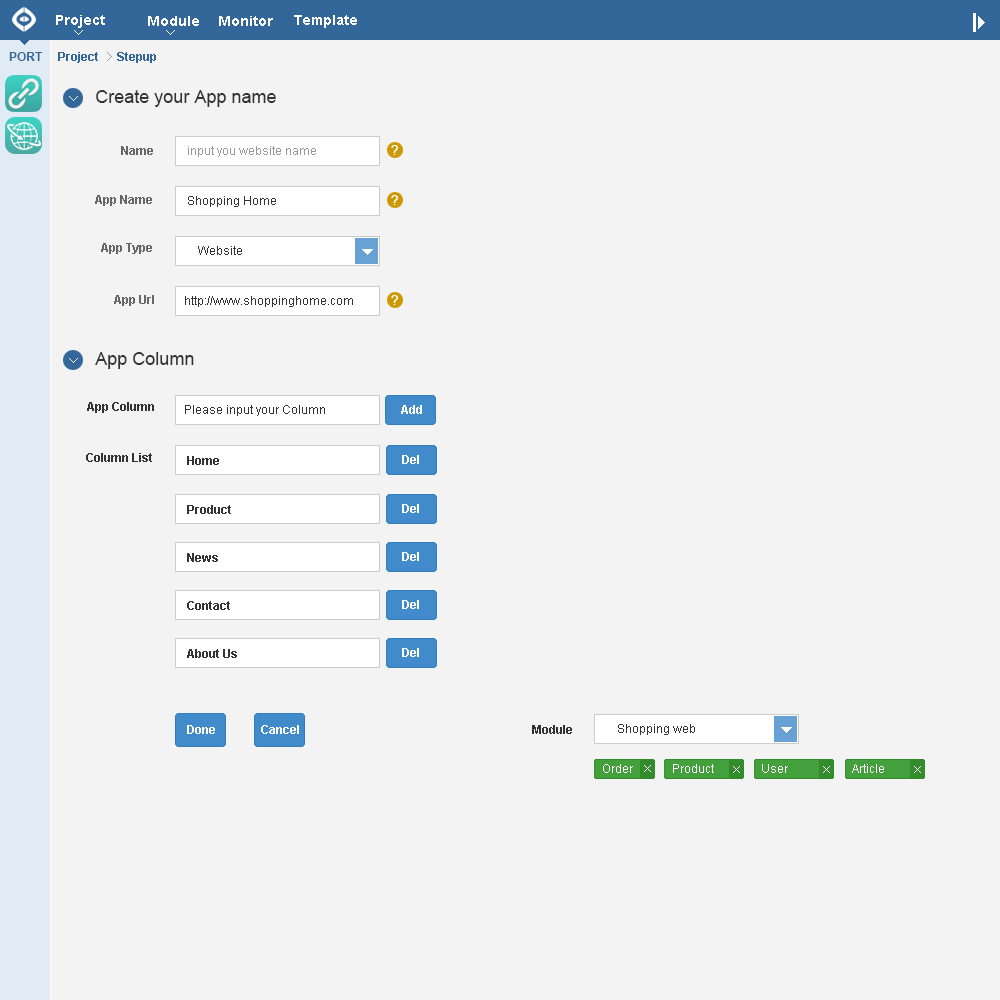
<style>
.page{position:relative;width:1000px;height:1000px;background:#f3f3f3}
.page>*{position:absolute;margin:0}
.t1{font:14px "Arial-BoldMT";color:#ffffff}
.t2{font:12px "Arial-BoldMT";color:#336699}
.t3{font:18px "ArialMT";color:#333333}
.t4{font:12px "Arial-BoldMT";color:#666666}
.t5{font:12px "ArialMT";color:#999999}
.t6{font:12px "ArialMT";color:#333333}
.t7{font:12px "Arial-BoldMT";color:#333333}
.t8{font:12px "Arial-BoldMT";color:#ffffff}
.t9{font:12.2px "Arial-BoldMT";color:#333333}
.t10{font:12px "ArialMT";color:#ffffff}
</style>
<div class="page">
<p class="t1" style="left:56px;top:15px;width:49px;height:13px">Project</p>
<p class="t1" style="left:148px;top:16px;width:51px;height:10px">Module</p>
<p class="t1" style="left:219px;top:16px;width:54px;height:10px">Monitor</p>
<p class="t1" style="left:294px;top:15px;width:63px;height:13px">Template</p>
<p class="t2" style="left:9px;top:52px;width:34px;height:9px">PORT</p>
<p class="t2" style="left:58px;top:52px;width:40px;height:11px">Project</p>
<p class="t2" style="left:117px;top:52px;width:39px;height:11px">Stepup</p>
<p class="t3" style="left:96px;top:90px;width:180px;height:17px">Create your App name</p>
<p class="t4" style="left:121px;top:146px;width:32px;height:9px">Name</p>
<p class="t5" style="left:188px;top:146px;width:128px;height:11px">input you website name</p>
<p class="t4" style="left:95px;top:195px;width:57px;height:11px">App Name</p>
<p class="t6" style="left:188px;top:196px;width:88px;height:11px">Shopping Home</p>
<p class="t4" style="left:101px;top:243px;width:51px;height:11px">App Type</p>
<p class="t6" style="left:198px;top:246px;width:44px;height:9px">Website</p>
<p class="t4" style="left:114px;top:295px;width:40px;height:11px">App Url</p>
<p class="t6" style="left:185px;top:296px;width:168px;height:11px">http://www.shoppinghome.com</p>
<p class="t3" style="left:95px;top:352px;width:99px;height:17px">App Column</p>
<p class="t7" style="left:87px;top:402px;width:67px;height:11px">App Column</p>
<p class="t6" style="left:185px;top:405px;width:140px;height:11px">Please input your Column</p>
<p class="t8" style="left:401px;top:405px;width:21px;height:9px">Add</p>
<p class="t7" style="left:86px;top:453px;width:66px;height:9px">Column List</p>
<p class="t9" style="left:187px;top:456px;width:32px;height:9px">Home</p>
<p class="t8" style="left:402px;top:455px;width:17px;height:9px">Del</p>
<p class="t9" style="left:187px;top:505px;width:44px;height:9px">Product</p>
<p class="t8" style="left:402px;top:504px;width:17px;height:9px">Del</p>
<p class="t9" style="left:187px;top:553px;width:31px;height:9px">News</p>
<p class="t8" style="left:402px;top:552px;width:17px;height:9px">Del</p>
<p class="t9" style="left:187px;top:601px;width:43px;height:9px">Contact</p>
<p class="t8" style="left:402px;top:600px;width:17px;height:9px">Del</p>
<p class="t9" style="left:187px;top:649px;width:50px;height:9px">About Us</p>
<p class="t8" style="left:402px;top:648px;width:17px;height:9px">Del</p>
<p class="t8" style="left:187px;top:725px;width:28px;height:9px">Done</p>
<p class="t8" style="left:261px;top:725px;width:38px;height:9px">Cancel</p>
<p class="t7" style="left:532px;top:725px;width:40px;height:9px">Module</p>
<p class="t6" style="left:618px;top:724px;width:77px;height:11px">Shopping web</p>
<p class="t10" style="left:603px;top:764px;width:30px;height:9px">Order</p>
<p class="t10" style="left:673px;top:764px;width:41px;height:9px">Product</p>
<p class="t10" style="left:762px;top:764px;width:26px;height:9px">User</p>
<p class="t10" style="left:852px;top:764px;width:32px;height:9px">Article</p>
</div>
